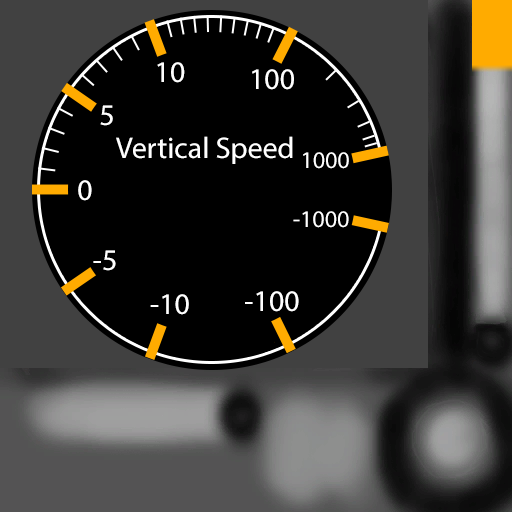
<style>
.page{position:relative;width:512px;height:512px;background:#000000}
.page>*{position:absolute;margin:0}
.t1{font:30px "MyriadPro-Regular";color:#ffffff}
.t2{font:24px "MyriadPro-Regular";color:#ffffff}
</style>
<div class="page">
<p class="t1" style="left:157px;top:62px;width:28px;height:21px">10</p>
<p class="t1" style="left:252px;top:69px;width:42px;height:21px">100</p>
<p class="t1" style="left:100px;top:105px;width:13px;height:21px">5</p>
<p class="t1" style="left:116px;top:136px;width:177px;height:28px">Vertical Speed</p>
<p class="t2" style="left:303px;top:152px;width:46px;height:17px">1000</p>
<p class="t1" style="left:78px;top:180px;width:14px;height:21px">0</p>
<p class="t2" style="left:293px;top:211px;width:56px;height:17px">-1000</p>
<p class="t1" style="left:93px;top:250px;width:23px;height:21px">-5</p>
<p class="t1" style="left:150px;top:294px;width:39px;height:21px">-10</p>
<p class="t1" style="left:245px;top:291px;width:54px;height:21px">-100</p>
</div>
